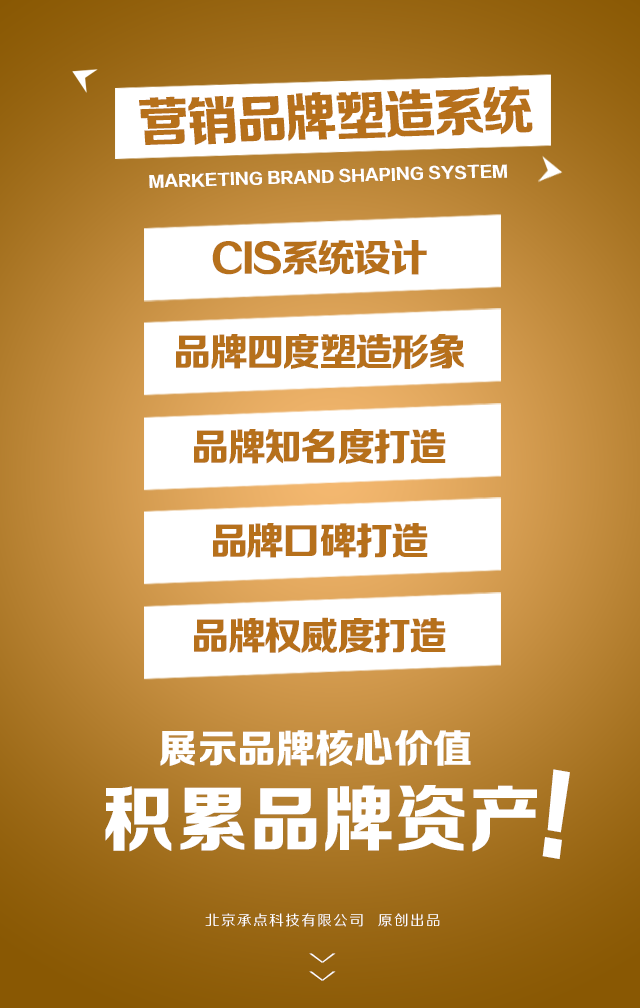
<style>
.page{position:relative;width:640px;height:1008px;background:#ffffff}
.page>*{position:absolute;margin:0}
.t1{font:53.2px "FZZDHJW--GB1-0";letter-spacing:-0.05em;color:#b6701b;text-transform:uppercase}
.t2{font:15.6px "FZZDHJW--GB1-0";letter-spacing:0.005em;color:#ffffff;text-transform:uppercase}
.t3{font:38.5px "FZZDHJW--GB1-0";letter-spacing:-0.05em;color:#b6701b;text-transform:uppercase}
.t4{font:39.5px "FZZDHJW--GB1-0";letter-spacing:0.005em;color:#ffffff;text-transform:uppercase}
.t5{font:103.3px "FZZDHJW--GB1-0";letter-spacing:0.005em;color:#ffffff;text-transform:uppercase;scale:0.85 1}
.t6{font:72.8px "FZZDHJW--GB1-0";letter-spacing:0.005em;color:#ffffff;text-transform:uppercase}
.t7{font:14.2px "FZZHJW--GB1-0";letter-spacing:0.1em;color:#ffffff;text-transform:uppercase}
.t8{font:36.8px "FZZXHJW--GB1-0";letter-spacing:0.5em;color:#ffffff;text-transform:uppercase;scale:0.44 1}
</style>
<div class="page">
<p class="t1" style="left:139px;top:86px;width:394px;height:59px;rotate:-2deg">营销品牌塑造系统</p>
<p class="t2" style="left:149px;top:164px;width:358px;height:24px;rotate:-2deg">Marketing brand shaping system</p>
<p class="t3" style="left:212px;top:240px;width:215px;height:35px">CIS系统设计</p>
<p class="t3" style="left:176px;top:334px;width:288px;height:35px">品牌四度塑造形象</p>
<p class="t3" style="left:194px;top:429px;width:252px;height:35px">品牌知名度打造</p>
<p class="t3" style="left:213px;top:523px;width:215px;height:35px">品牌口碑打造</p>
<p class="t3" style="left:194px;top:617px;width:252px;height:36px">品牌权威度打造</p>
<p class="t4" style="left:160px;top:730px;width:311px;height:36px">展示品牌核心价值</p>
<p class="t5" style="left:542px;top:769px;width:28px;height:90px;rotate:10deg">!</p>
<p class="t6" style="left:105px;top:785px;width:432px;height:67px">积累品牌资产</p>
<p class="t7" style="left:205px;top:913px;width:235px;height:14px">北京承点科技有限公司  原创出品</p>
<p class="t8" style="left:309px;top:953px;width:27px;height:28px;rotate:90deg">&gt;&gt;</p>
</div>
